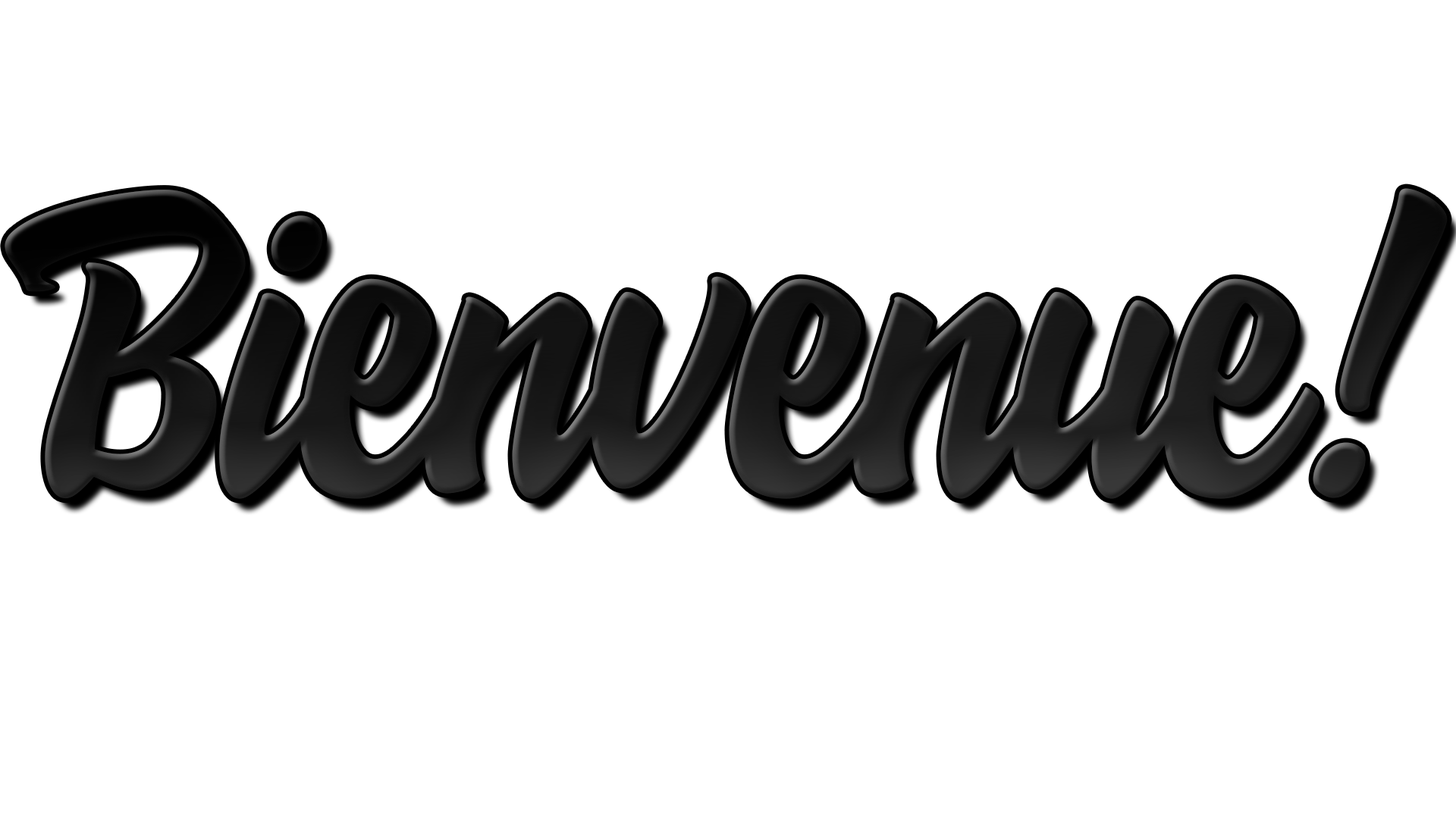
<style>
.page{position:relative;width:1456px;height:819px;background:#ffffff}
.page>*{position:absolute;margin:0}
.t1{font:381.2px "HoodsonScriptFreeDemo-Regular";color:#1a1a1a}
</style>
<div class="page">
<p class="t1" style="left:5px;top:188px;width:1443px;height:311px">Bienvenue!</p>
</div>
